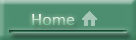
<style>
.page{position:relative;width:136px;height:40px;background:#4e8e70}
.page>*{position:absolute;margin:0}
.t1{font:18px "Calibri"}
</style>
<div class="page">
<p class="t1" style="left:32px;top:14px;width:43px;height:11px">Home</p>
</div>
